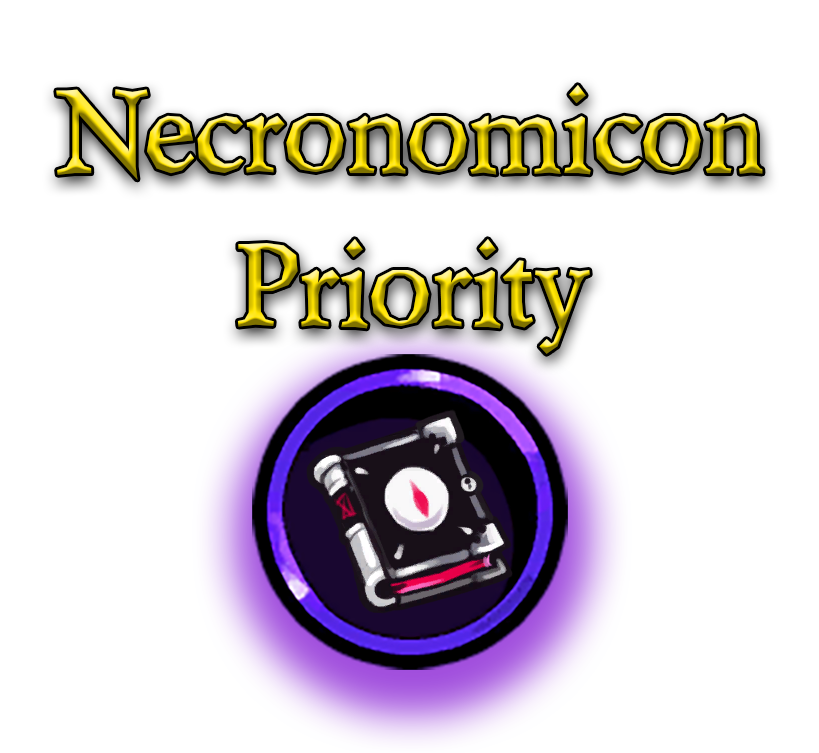
<style>
.page{position:relative;width:819px;height:753px;background:#ffffff}
.page>*{position:absolute;margin:0}
.t1{font:128px "Berylium-Bold"}
</style>
<div class="page">
<p class="t1" style="left:56px;top:85px;width:707px;height:269px;text-align:center">Necronomicon<br>Priority</p>
</div>
